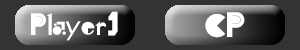
<style>
.page{position:relative;width:300px;height:50px;background:#333333}
.page>*{position:absolute;margin:0}
.t1{font:29.2px "pigmo-00";color:#ffffff}
.t2{font:33.3px "pigmo-00";color:#ffffff}
</style>
<div class="page">
<p class="t1" style="left:31px;top:11px;width:87px;height:30px">Player1</p>
<p class="t2" style="left:205px;top:12px;width:40px;height:26px">CP</p>
</div>
